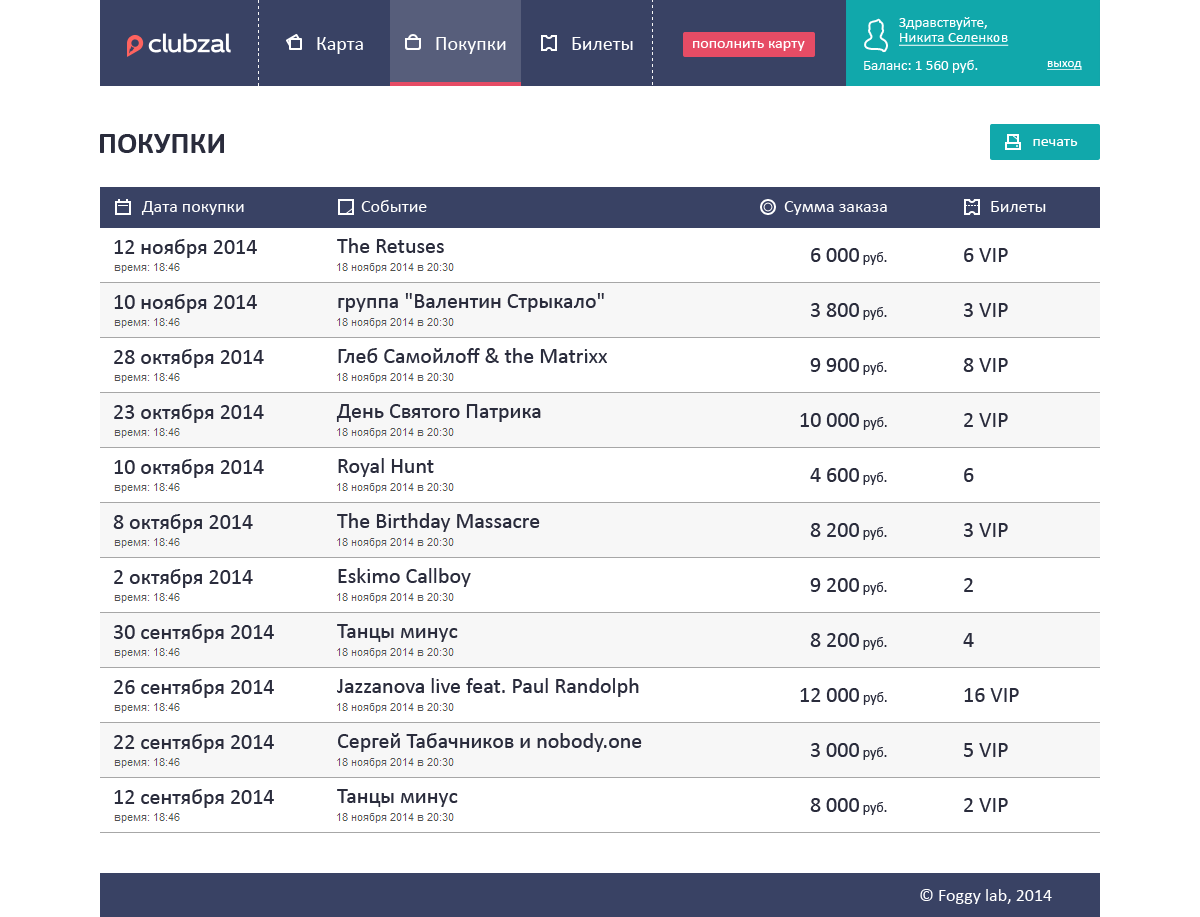
<style>
.page{position:relative;width:1200px;height:917px;background:#ffffff}
.page>*{position:absolute;margin:0}
.t1{font:15px "Calibri";color:#ffffff}
.t2{font:20px "Calibri";color:#ffffff}
.t3{font:16px "Calibri";color:#ffffff}
.t4{font:15px "Calibri";color:#ffffff;text-decoration:underline}
.t5{font:13px "Calibri";color:#ffffff;text-decoration:underline}
.t6{font:30px "Calibri-Bold";color:#2a2c3c;text-transform:uppercase}
.t7{font:16px "Calibri";color:#fffffe}
.t8{font:18px "Calibri";color:#ffffff}
.t9{font:22px "Calibri";color:#2a2c3c}
.t10{font:14px "Calibri";color:#2a2c3c}
</style>
<div class="page">
<p class="t1" style="left:899px;top:17px;width:88px;height:13px">Здравствуйте,</p>
<p class="t2" style="left:317px;top:37px;width:46px;height:17px">Карта</p>
<p class="t2" style="left:436px;top:37px;width:70px;height:17px">Покупки</p>
<p class="t2" style="left:572px;top:37px;width:61px;height:13px">Билеты</p>
<p class="t3" style="left:693px;top:41px;width:112px;height:10px">пополнить карту</p>
<p class="t4" style="left:899px;top:33px;width:110px;height:13px">Никита Селенков</p>
<p class="t1" style="left:864px;top:60px;width:114px;height:13px">Баланс: 1 560 руб.</p>
<p class="t5" style="left:1047px;top:61px;width:35px;height:9px">выход</p>
<p class="t6" style="left:100px;top:134px;width:124px;height:19px">покупки</p>
<p class="t7" style="left:1033px;top:139px;width:45px;height:7px">печать</p>
<p class="t8" style="left:141px;top:201px;width:103px;height:14px">Дата покупки</p>
<p class="t8" style="left:361px;top:200px;width:66px;height:12px">Событие</p>
<p class="t8" style="left:784px;top:201px;width:103px;height:14px">Сумма заказа</p>
<p class="t8" style="left:991px;top:201px;width:55px;height:11px">Билеты</p>
<p class="t9" style="left:114px;top:239px;width:143px;height:19px">12 ноября 2014</p>
<p class="t9" style="left:337px;top:238px;width:107px;height:15px">The Retuses</p>
<p class="t9" style="left:811px;top:248px;width:76px;height:17px">6 000<span class="t10"> руб.</span></p>
<p class="t9" style="left:964px;top:248px;width:44px;height:14px">6 VIP</p>
<p class="t9" style="left:114px;top:294px;width:143px;height:19px">10 ноября 2014</p>
<p class="t9" style="left:338px;top:293px;width:266px;height:19px">группа "Валентин Стрыкало"</p>
<p class="t9" style="left:811px;top:303px;width:76px;height:17px">3 800<span class="t10"> руб.</span></p>
<p class="t9" style="left:964px;top:303px;width:44px;height:14px">3 VIP</p>
<p class="t9" style="left:114px;top:349px;width:150px;height:19px">28 октября 2014</p>
<p class="t9" style="left:338px;top:348px;width:269px;height:15px">Глеб Самойлоff &amp; the Matrixx</p>
<p class="t9" style="left:810px;top:358px;width:77px;height:17px">9 900<span class="t10"> руб.</span></p>
<p class="t9" style="left:963px;top:358px;width:45px;height:14px">8 VIP</p>
<p class="t9" style="left:114px;top:404px;width:150px;height:19px">23 октября 2014</p>
<p class="t9" style="left:336px;top:404px;width:205px;height:18px">День Святого Патрика</p>
<p class="t9" style="left:800px;top:413px;width:87px;height:17px">10 000<span class="t10"> руб.</span></p>
<p class="t9" style="left:964px;top:413px;width:44px;height:14px">2 VIP</p>
<p class="t9" style="left:114px;top:459px;width:150px;height:19px">10 октября 2014</p>
<p class="t9" style="left:338px;top:458px;width:96px;height:19px">Royal Hunt</p>
<p class="t9" style="left:810px;top:468px;width:77px;height:17px">4 600<span class="t10"> руб.</span></p>
<p class="t9" style="left:964px;top:468px;width:10px;height:14px">6</p>
<p class="t9" style="left:113px;top:514px;width:140px;height:19px">8 октября 2014</p>
<p class="t9" style="left:337px;top:513px;width:203px;height:19px">The Birthday Massacre</p>
<p class="t9" style="left:810px;top:523px;width:77px;height:17px">8 200<span class="t10"> руб.</span></p>
<p class="t9" style="left:964px;top:523px;width:44px;height:14px">3 VIP</p>
<p class="t9" style="left:114px;top:569px;width:139px;height:19px">2 октября 2014</p>
<p class="t9" style="left:338px;top:568px;width:133px;height:19px">Eskimo Callboy</p>
<p class="t9" style="left:810px;top:578px;width:77px;height:17px">9 200<span class="t10"> руб.</span></p>
<p class="t9" style="left:964px;top:578px;width:9px;height:14px">2</p>
<p class="t9" style="left:114px;top:624px;width:160px;height:19px">30 сентября 2014</p>
<p class="t9" style="left:337px;top:624px;width:121px;height:18px">Танцы минус</p>
<p class="t9" style="left:810px;top:633px;width:77px;height:17px">8 200<span class="t10"> руб.</span></p>
<p class="t9" style="left:963px;top:633px;width:11px;height:14px">4</p>
<p class="t9" style="left:337px;top:678px;width:302px;height:19px">Jazzanova live feat. Paul Randolph</p>
<p class="t9" style="left:114px;top:679px;width:160px;height:19px">26 сентября 2014</p>
<p class="t9" style="left:800px;top:688px;width:87px;height:17px">12 000<span class="t10"> руб.</span></p>
<p class="t9" style="left:964px;top:688px;width:55px;height:14px">16 VIP</p>
<p class="t9" style="left:114px;top:734px;width:160px;height:19px">22 сентября 2014</p>
<p class="t9" style="left:338px;top:733px;width:304px;height:19px">Сергей Табачников и nobody.one</p>
<p class="t9" style="left:811px;top:743px;width:76px;height:17px">3 000<span class="t10"> руб.</span></p>
<p class="t9" style="left:964px;top:743px;width:44px;height:14px">5 VIP</p>
<p class="t9" style="left:114px;top:789px;width:160px;height:19px">12 сентября 2014</p>
<p class="t9" style="left:337px;top:789px;width:121px;height:18px">Танцы минус</p>
<p class="t9" style="left:810px;top:798px;width:77px;height:17px">8 000<span class="t10"> руб.</span></p>
<p class="t9" style="left:964px;top:798px;width:44px;height:14px">2 VIP</p>
<p class="t8" style="left:920px;top:889px;width:132px;height:15px">© Foggy lab, 2014</p>
</div>
